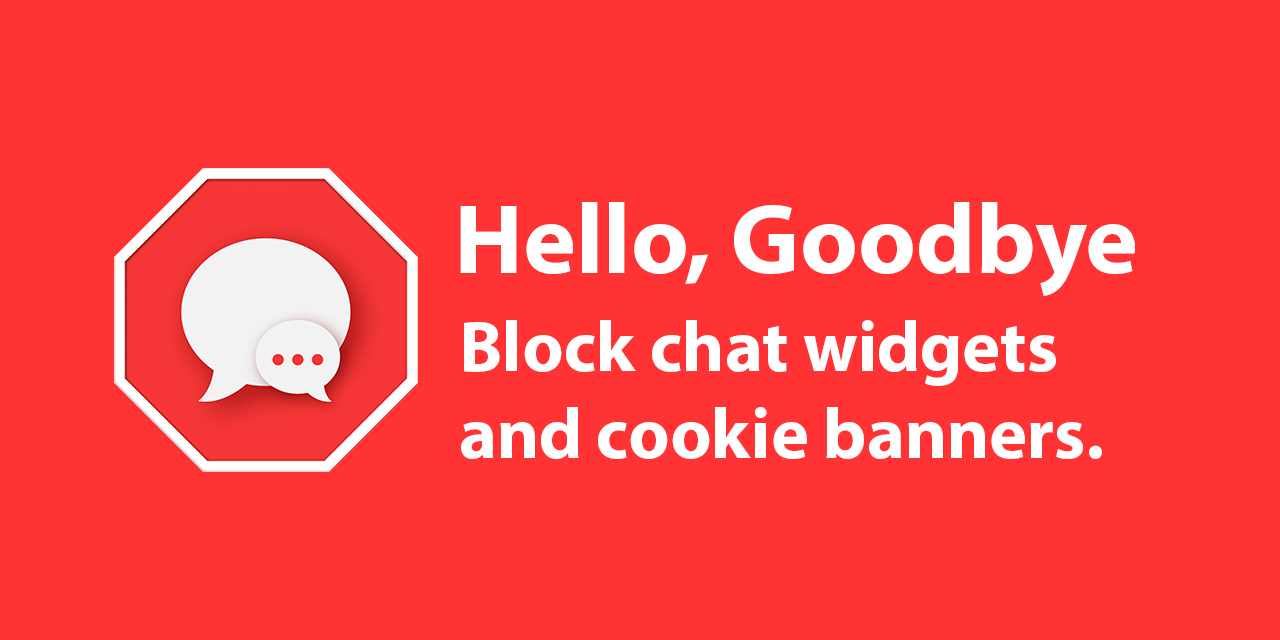
<style>
.page{position:relative;width:1280px;height:640px;background:#ff3333}
.page>*{position:absolute;margin:0}
.t1{font:100px "MyriadPro-Bold";color:#ffffff}
.t2{font:72px "MyriadPro-Bold";color:#ffffff}
</style>
<div class="page">
<p class="t1" style="left:460px;top:202px;width:675px;height:94px">Hello, Goodbye</p>
<p class="t2" style="left:461px;top:320px;width:641px;height:139px">Block chat widgets<br>and cookie banners.</p>
</div>
